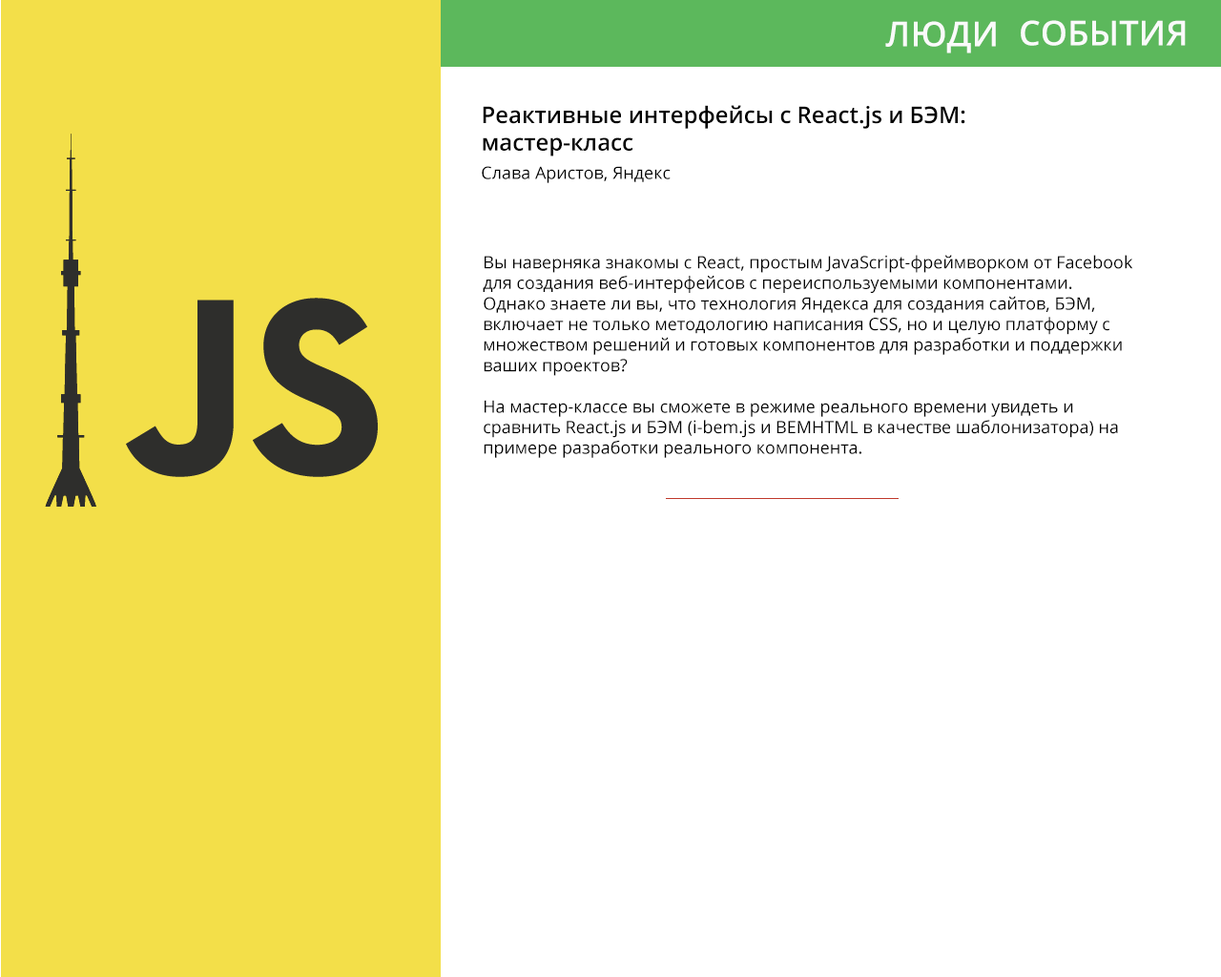
<style>
.page{position:relative;width:1221px;height:977px;background:#ffffff}
.page>*{position:absolute;margin:0}
.t1{font:34.3px "OpenSans-Semibold";color:#fafafa}
.t2{font:22.9px "OpenSans-Semibold";color:#000000}
.t3{font:17.2px "OpenSans";color:#000000}
</style>
<div class="page">
<p class="t1" style="left:885px;top:21px;width:111px;height:32px">ЛЮДИ</p>
<p class="t1" style="left:1021px;top:20px;width:165px;height:26px">СОБЫТИЯ</p>
<p class="t2" style="left:483px;top:105px;width:482px;height:51px">Реактивные интерфейсы с React.js и БЭМ: <br>мастер-класс</p>
<p class="t3" style="left:482px;top:166px;width:189px;height:17px">Слава Аристов, Яндекс</p>
<p class="t3" style="left:483px;top:255px;width:650px;height:203px">Вы наверняка знакомы с React, простым JavaScript-фреймворком от Facebook для создания веб-интерфейсов с переиспользуемыми компонентами. Однако знаете ли вы, что технология Яндекса для создания сайтов, БЭМ, включает не только методологию написания CSS, но и целую платформу с множеством решений и готовых компонентов для разработки и поддержки ваших проектов?<br><br>На мастер-классе вы сможете в режиме реального времени увидеть и сравнить React.js и БЭМ (i-bem.js и BEMHTML в качестве шаблонизатора) на примере разработки реального компонента.</p>
</div>
